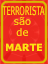
<style>
.page{position:relative;width:48px;height:64px;background:#eb271e}
.page>*{position:absolute;margin:0}
.t1{font:12px/10.7px "Verdana";color:#fde310;scale:0.54 1}
.t2{font:10px/10.7px "Verdana";color:#fde310}
.t3{font:10px/15.5px "Verdana-Bold";letter-spacing:-0.02em;color:#fde310}
</style>
<div class="page">
<p class="t1" style="left:2px;top:6px;width:43px;height:45px;text-align:center">TERRORISTA<br><span class="t2">são<br>de<br></span><span class="t3"> MARTE</span></p>
</div>
